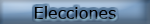
<style>
.page{position:relative;width:150px;height:24px}
.page>*{position:absolute;margin:0}
.t1{font:16px "Verdana";color:#000000}
</style>
<div class="page">
<p class="t1" style="left:34px;top:6px;width:82px;height:13px">Elecciones</p>
</div>
